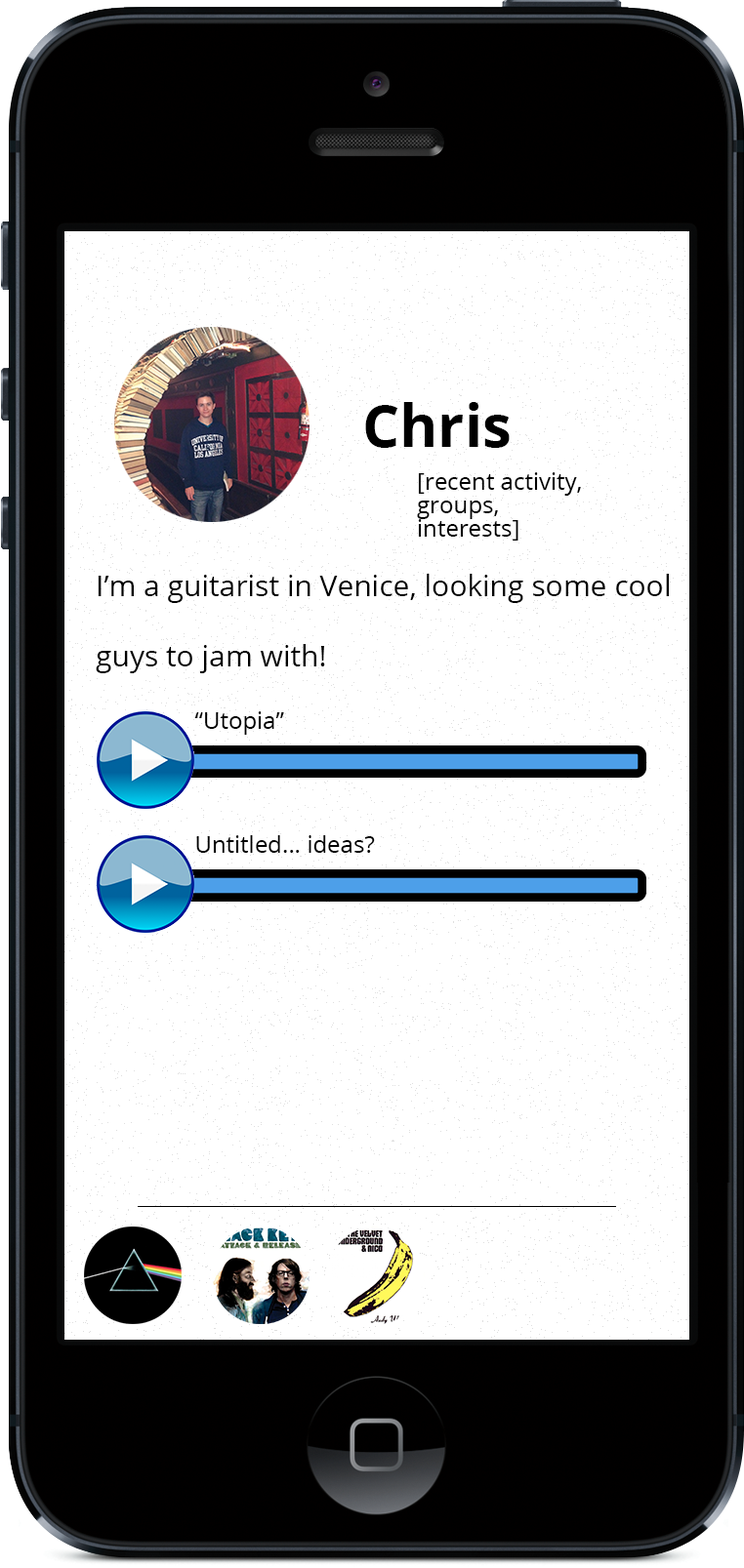
<style>
.page{position:relative;width:744px;height:1568px;background:#ffffff}
.page>*{position:absolute;margin:0}
.t1{font:58.5px "OpenSans-Bold";color:#000000}
.t2{font:23.4px/23.4px "OpenSans";color:#000000}
.t3{font:29.3px/70.3px "OpenSans";color:#000000}
.t4{font:23.4px "OpenSans";color:#000000}
</style>
<div class="page">
<p class="t1" style="left:365px;top:402px;width:144px;height:46px">Chris</p>
<p class="t2" style="left:417px;top:472px;width:164px;height:69px">[recent activity,<br>groups,<br>interests]</p>
<p class="t3" style="left:96px;top:574px;width:572px;height:99px">I’m a guitarist in Venice, looking some cool<br>guys to jam with!</p>
<p class="t4" style="left:194px;top:711px;width:90px;height:24px">“Utopia”</p>
<p class="t4" style="left:196px;top:835px;width:179px;height:18px">Untitled... ideas?</p>
</div>
